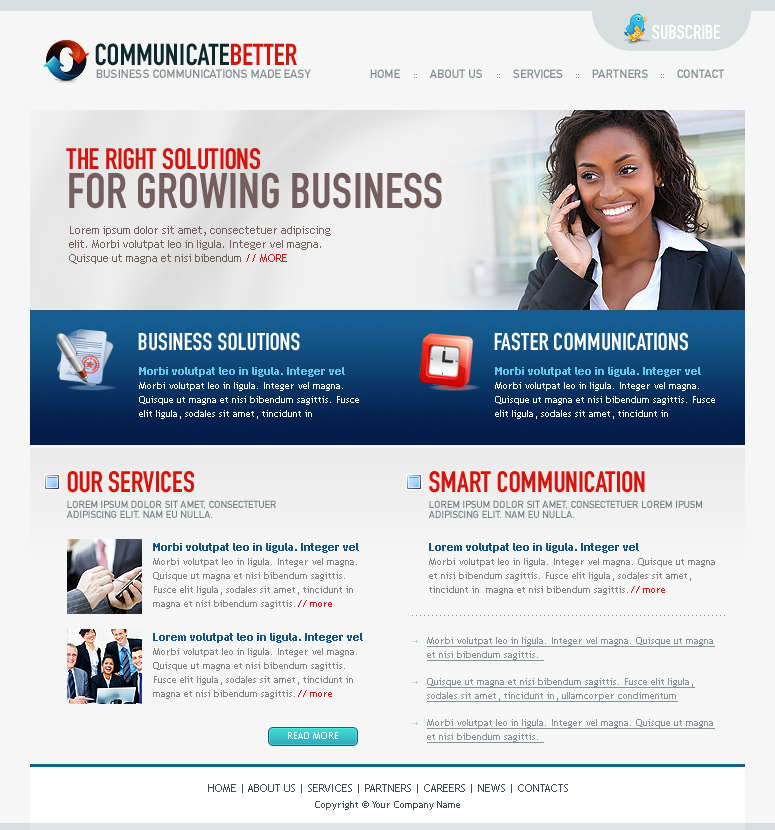
<style>
.page{position:relative;width:775px;height:830px;background:#f6f6f6}
.page>*{position:absolute;margin:0}
.t1{font:20px "DINEngschriftStd";color:#ffffff}
.t2{font:30px "DINEngschriftStd";color:#0c292b}
.t3{font:30px "DINEngschriftStd";color:#d7130b}
.t4{font:12px "DINMittelschriftStd";color:#818f90}
.t5{font:29px "DINEngschriftStd";color:#d7130b}
.t6{font:49px "DINEngschriftStd";color:#755f5e}
.t7{font:11px/14px "TrebuchetMS";color:#755f5e}
.t8{font:11px/14px "TrebuchetMS";color:#d7130b}
.t9{font:24px "DINEngschriftStd";color:#ffffff}
.t10{font:10px/14px "TrebuchetMS";color:#ffffff}
.t11{font:11px/14px "TrebuchetMS-Bold";color:#65c9ec}
.t12{font:10px/9.6px "DINMittelschriftStd";color:#738384;text-transform:uppercase}
.t13{font:10px/14px "TrebuchetMS";color:#848484}
.t14{font:11px/14px "TrebuchetMS-Bold";color:#125487}
.t15{font:10px/14px "TrebuchetMS";color:#d7130b}
.t16{font:10px "TrebuchetMS";color:#869496}
.t17{font:10px/14px "TrebuchetMS";color:#869496;text-decoration:underline}
.t18{font:10px "TrebuchetMS";color:#ffffff}
.t19{font:11px/16px "TrebuchetMS";color:#454b55}
.t20{font:10px/16px "TrebuchetMS";color:#454b55}
</style>
<div class="page">
<p class="t1" style="left:652px;top:24px;width:68px;height:15px">SUBSCRIBE</p>
<p class="t2" style="left:95px;top:43px;width:202px;height:23px">COMMUNICATE<span class="t3">BETTER</span></p>
<p class="t4" style="left:96px;top:69px;width:215px;height:9px">BUSINESS COMMUNICATIONS MADE EASY</p>
<p class="t4" style="left:370px;top:69px;width:30px;height:9px">HOME</p>
<p class="t4" style="left:429px;top:69px;width:53px;height:9px">ABOUT US</p>
<p class="t4" style="left:513px;top:69px;width:50px;height:9px">SERVICES</p>
<p class="t4" style="left:592px;top:69px;width:56px;height:9px">PARTNERS</p>
<p class="t4" style="left:677px;top:69px;width:47px;height:9px">CONTACT</p>
<p class="t5" style="left:66px;top:148px;width:194px;height:22px">THE RIGHT SOLUTIONS</p>
<p class="t6" style="left:69px;top:172px;width:373px;height:37px">FOR GROWING BUSINESS</p>
<p class="t7" style="left:69px;top:226px;width:262px;height:38px">Lorem ipsum dolor sit amet, consectetuer adipiscing elit. Morbi volutpat leo in ligula. Integer vel magna. Quisque ut magna et nisi bibendum <span class="t8">// MORE</span></p>
<p class="t9" style="left:138px;top:332px;width:162px;height:19px">BUSINESS SOLUTIONS</p>
<p class="t9" style="left:494px;top:332px;width:194px;height:19px">FASTER COMMUNICATIONS</p>
<p class="t10" style="left:139px;top:367px;width:220px;height:52px"><span class="t11">Morbi volutpat leo in ligula. Integer vel <br></span>Morbi volutpat leo in ligula. Integer vel magna. Quisque ut magna et nisi bibendum sagittis. Fusce elit ligula, sodales sit amet, tincidunt in</p>
<p class="t10" style="left:495px;top:367px;width:220px;height:52px"><span class="t11">Morbi volutpat leo in ligula. Integer vel <br></span>Morbi volutpat leo in ligula. Integer vel magna. Quisque ut magna et nisi bibendum sagittis. Fusce elit ligula, sodales sit amet, tincidunt in</p>
<p class="t5" style="left:67px;top:471px;width:127px;height:22px">OUR SERVICES</p>
<p class="t5" style="left:429px;top:471px;width:216px;height:22px">SMART COMMUNICATION</p>
<p class="t12" style="left:66px;top:500px;width:210px;height:18px">LOREM IPSUM DOLOR SIT AMET, CONSECTETUER <br>ADIPISCING ELIT. NAM EU NULLA.</p>
<p class="t12" style="left:428px;top:500px;width:274px;height:18px">LOREM IPSUM DOLOR SIT AMET, CONSECTETUER LOREM IPUSM<br>ADIPISCING ELIT. NAM EU NULLA.</p>
<p class="t13" style="left:153px;top:543px;width:206px;height:66px"><span class="t14">Morbi volutpat leo in ligula. Integer vel <br></span>Morbi volutpat leo in ligula. Integer vel magna. Quisque ut magna et nisi bibendum sagittis. Fusce elit ligula, sodales sit amet, tincidunt in  magna et nisi bibendum sagittis.<span class="t15">// more</span></p>
<p class="t13" style="left:429px;top:543px;width:286px;height:52px"><span class="t14">Lorem volutpat leo in ligula. Integer vel <br></span>Morbi volutpat leo in ligula. Integer vel magna. Quisque ut magna et nisi bibendum sagittis. Fusce elit ligula, sodales sit amet, tincidunt in  magna et nisi bibendum sagittis.<span class="t15">// more</span></p>
<p class="t16" style="left:412px;top:615px;width:313px;height:1px">...............................................................................</p>
<p class="t13" style="left:153px;top:633px;width:210px;height:66px"><span class="t14">Lorem volutpat leo in ligula. Integer vel <br></span>Morbi volutpat leo in ligula. Integer vel magna. Quisque ut magna et nisi bibendum sagittis. Fusce elit ligula, sodales sit amet, tincidunt in  magna et nisi bibendum sagittis.<span class="t15">// more</span></p>
<p class="t17" style="left:427px;top:637px;width:288px;height:24px">Morbi volutpat leo in ligula. Integer vel magna. Quisque ut magna et nisi bibendum sagittis.</p>
<p class="t17" style="left:427px;top:678px;width:268px;height:24px">Quisque ut magna et nisi bibendum sagittis. Fusce elit ligula, sodales sit amet, tincidunt in, ullamcorper condimentum</p>
<p class="t17" style="left:427px;top:719px;width:288px;height:24px">Morbi volutpat leo in ligula. Integer vel magna. Quisque ut magna et nisi bibendum sagittis.</p>
<p class="t18" style="left:288px;top:732px;width:50px;height:7px">READ MORE</p>
<p class="t19" style="left:208px;top:784px;width:360px;height:26px;text-align:center">HOME | ABOUT US | SERVICES | PARTNERS | CAREERS | NEWS | CONTACTS<br><span class="t20">Copyright © Your Company Name</span></p>
</div>
